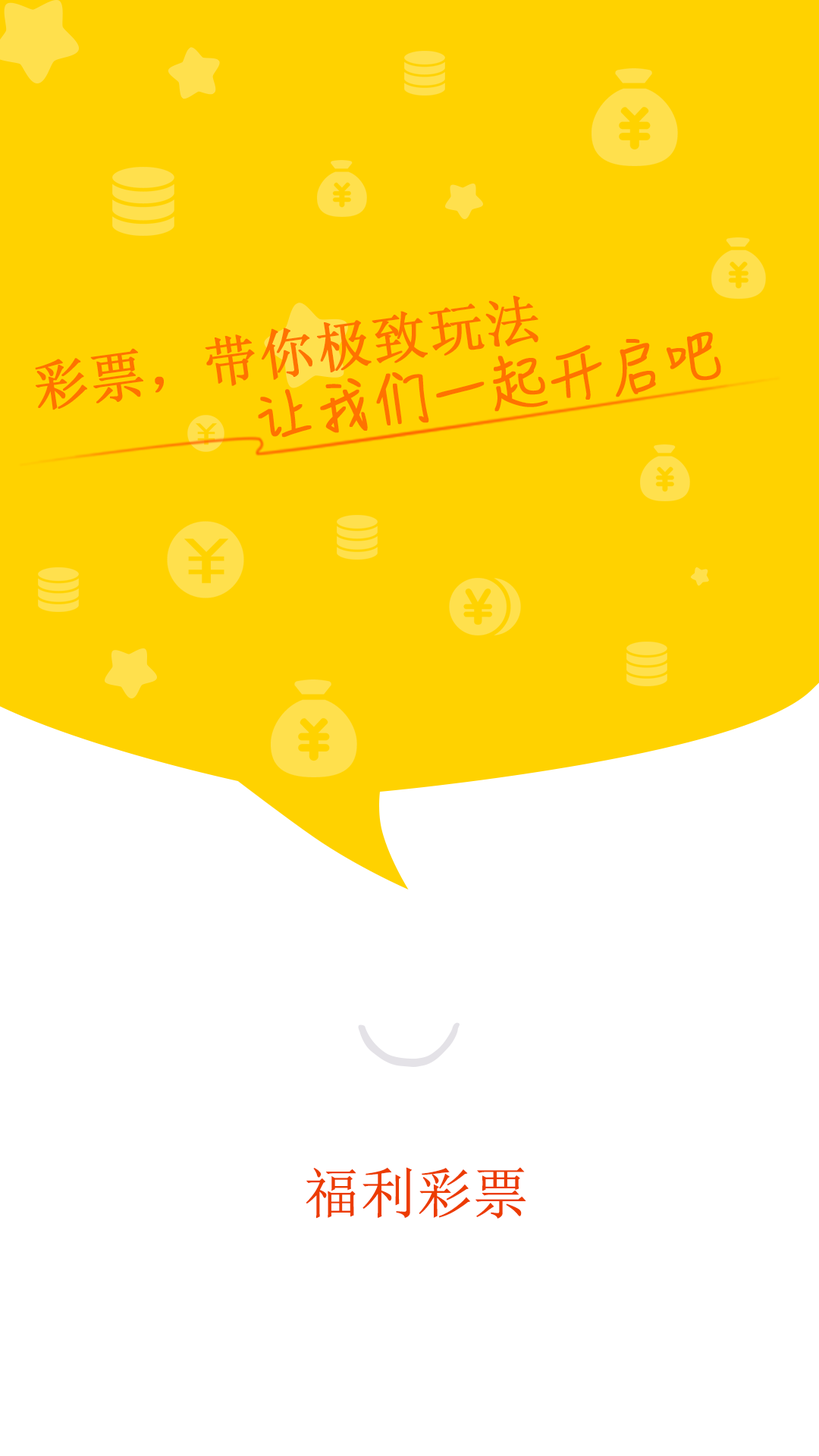
<style>
.page{position:relative;width:819px;height:1456px;background:#ffffff}
.page>*{position:absolute;margin:0}
.t1{font:54.2px "SimSun";letter-spacing:0.025em;color:#ff7200;font-weight:bold}
.t2{font:54.6px "HanziPenSC-W3";letter-spacing:0.025em;color:#ff7200;font-weight:bold}
.t3{font:54.8px "SimSun";color:#ec3c00;font-weight:bold}
</style>
<div class="page">
<p class="t1" style="left:35px;top:296px;width:503px;height:114px;rotate:-8deg">彩票，带你极致玩法</p>
<p class="t2" style="left:258px;top:331px;width:463px;height:107px;rotate:-8deg">让我们一起开启吧</p>
<p class="t3" style="left:306px;top:1167px;width:220px;height:52px">福利彩票</p>
</div>
